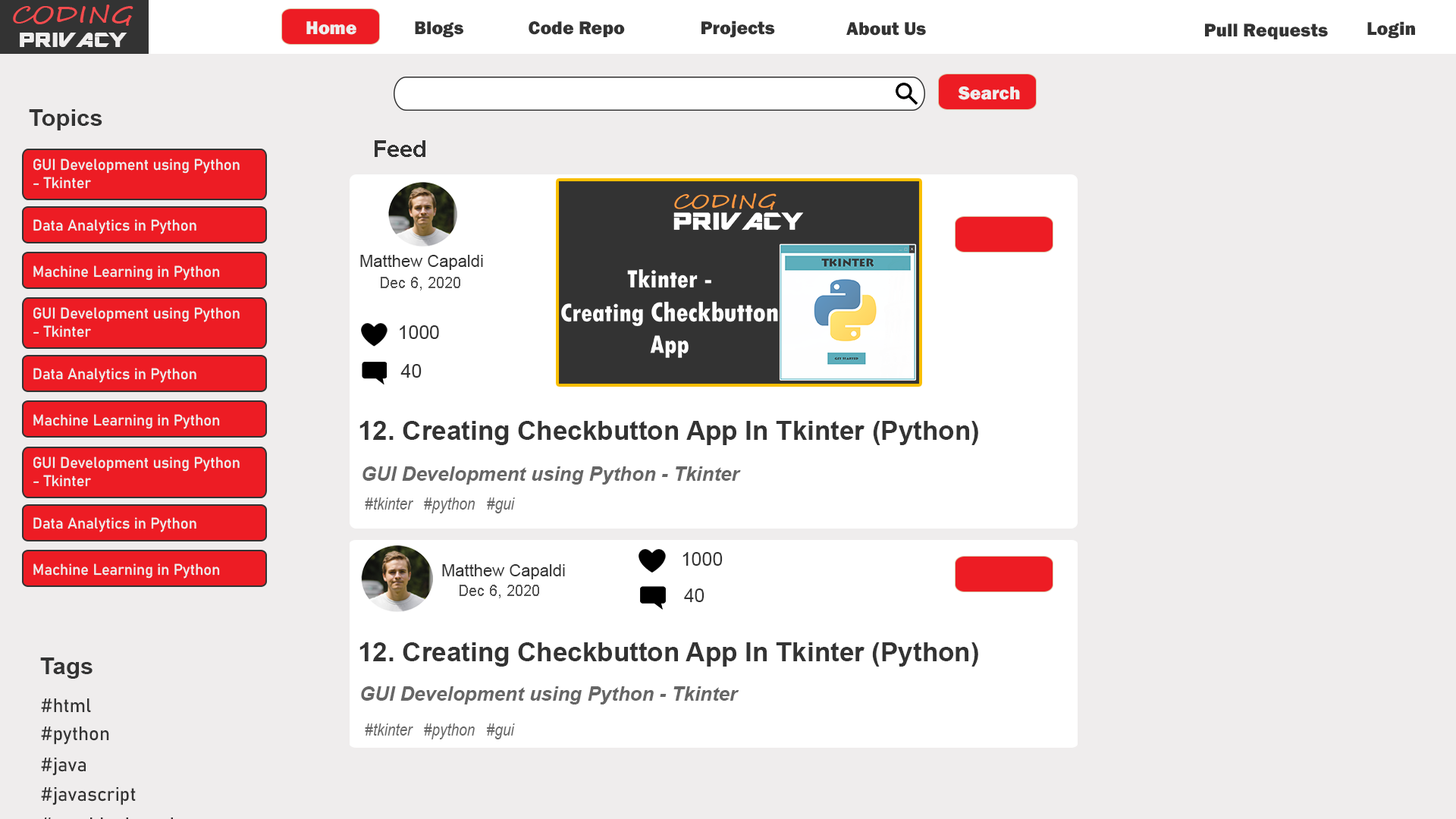
<style>
.page{position:relative;width:1456px;height:819px;background:#efeded}
.page>*{position:absolute;margin:0}
.t1{font:22.7px "SegoeScript";color:#f24c4e;scale:1.23 1}
.t2{font:18.9px "FranklinGothic-Heavy";color:#eeeeee}
.t3{font:18.9px "FranklinGothic-Heavy";color:#333333}
.t4{font:22.6px "ARDESTINE";color:#efeded;scale:1.24 1}
.t5{font:23.4px "Arial-BoldMT";color:#333333}
.t6{font:15.2px "Bahnschrift";color:#eeeeee}
.t7{font:16.7px "ArialMT";color:#333333}
.t8{font:15.2px "ArialMT";color:#555555}
.t9{font:19px "ArialMT";color:#333333}
.t10{font:26.5px "Arial-BoldMT";color:#333333}
.t11{font:19.7px "Arial-BoldItalicMT";color:#666666}
.t12{font:17.4px "ArialNarrow-Italic";color:#666666}
.t13{font:19.1px "Bahnschrift";color:#333333}
</style>
<div class="page">
<p class="t1" style="left:13px;top:5px;width:120px;height:21px">CODING</p>
<p class="t2" style="left:306px;top:21px;width:50px;height:14px">Home</p>
<p class="t3" style="left:415px;top:21px;width:48px;height:17px">Blogs</p>
<p class="t3" style="left:529px;top:21px;width:96px;height:16px">Code Repo</p>
<p class="t3" style="left:701px;top:20px;width:74px;height:18px">Projects</p>
<p class="t3" style="left:846px;top:22px;width:80px;height:14px">About Us</p>
<p class="t3" style="left:1205px;top:24px;width:123px;height:15px">Pull Requests</p>
<p class="t3" style="left:1367px;top:21px;width:48px;height:18px">Login</p>
<p class="t4" style="left:20px;top:33px;width:107px;height:14px">PRIVACY</p>
<p class="t2" style="left:958px;top:86px;width:62px;height:14px">Search</p>
<p class="t5" style="left:29px;top:109px;width:73px;height:21px">Topics</p>
<p class="t5" style="left:375px;top:140px;width:50px;height:17px">Feed</p>
<p class="t6" style="left:33px;top:158px;width:207px;height:31px">GUI Development using Python <br>- Tkinter</p>
<p class="t6" style="left:33px;top:219px;width:163px;height:15px">Data Analytics in Python</p>
<p class="t7" style="left:360px;top:255px;width:123px;height:15px">Matthew Capaldi</p>
<p class="t6" style="left:33px;top:265px;width:187px;height:16px">Machine Learning in Python</p>
<p class="t8" style="left:381px;top:277px;width:79px;height:13px">Dec 6, 2020</p>
<p class="t6" style="left:33px;top:307px;width:207px;height:30px">GUI Development using Python <br>- Tkinter</p>
<p class="t9" style="left:400px;top:325px;width:39px;height:14px">1000</p>
<p class="t9" style="left:400px;top:364px;width:22px;height:14px">40</p>
<p class="t6" style="left:33px;top:368px;width:163px;height:15px">Data Analytics in Python</p>
<p class="t6" style="left:33px;top:414px;width:187px;height:15px">Machine Learning in Python</p>
<p class="t10" style="left:359px;top:421px;width:619px;height:24px">12. Creating Checkbutton App In Tkinter (Python)</p>
<p class="t6" style="left:33px;top:457px;width:207px;height:30px">GUI Development using Python <br>- Tkinter</p>
<p class="t11" style="left:362px;top:466px;width:379px;height:19px">GUI Development using Python - Tkinter</p>
<p class="t12" style="left:365px;top:497px;width:150px;height:16px">#tkinter   #python   #gui</p>
<p class="t6" style="left:33px;top:517px;width:163px;height:15px">Data Analytics in Python</p>
<p class="t9" style="left:682px;top:552px;width:41px;height:14px">1000</p>
<p class="t6" style="left:33px;top:563px;width:187px;height:16px">Machine Learning in Python</p>
<p class="t7" style="left:442px;top:564px;width:123px;height:15px">Matthew Capaldi</p>
<p class="t8" style="left:460px;top:585px;width:79px;height:13px">Dec 6, 2020</p>
<p class="t9" style="left:684px;top:588px;width:20px;height:14px">40</p>
<p class="t10" style="left:359px;top:642px;width:619px;height:25px">12. Creating Checkbutton App In Tkinter (Python)</p>
<p class="t5" style="left:40px;top:657px;width:53px;height:22px">Tags</p>
<p class="t11" style="left:361px;top:686px;width:378px;height:18px">GUI Development using Python - Tkinter</p>
<p class="t13" style="left:41px;top:698px;width:50px;height:14px">#html</p>
<p class="t12" style="left:365px;top:723px;width:150px;height:16px">#tkinter   #python   #gui</p>
<p class="t13" style="left:41px;top:726px;width:68px;height:19px">#python</p>
<p class="t13" style="left:41px;top:758px;width:45px;height:18px">#java</p>
<p class="t13" style="left:41px;top:787px;width:95px;height:18px">#javascript</p>
</div>
